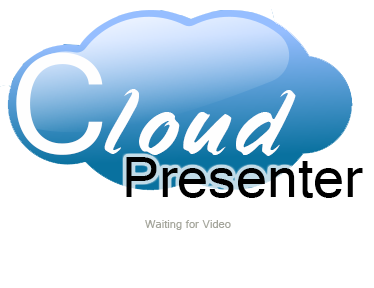
<style>
.page{position:relative;width:374px;height:288px;background:#ffffff}
.page>*{position:absolute;margin:0}
.t1{font:148.5px "Gautami";color:#fefefe}
.t2{font:99.6px "Speedline";color:#fefefe}
.t3{font:60px "Gautami";color:#000000}
.t4{font:12px "Gautami";color:#a5a69c}
</style>
<div class="page">
<p class="t1" style="left:16px;top:52px;width:87px;height:103px">C</p>
<p class="t2" style="left:104px;top:89px;width:192px;height:67px">loud</p>
<p class="t3" style="left:126px;top:157px;width:237px;height:41px">Presenter</p>
<p class="t4" style="left:145px;top:220px;width:86px;height:10px">Waiting for Video</p>
</div>
